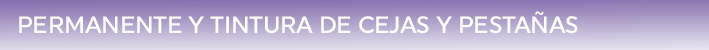
<style>
.page{position:relative;width:709px;height:50px}
.page>*{position:absolute;margin:0}
.t1{font:23.7px "Uniform-Medium";letter-spacing:-0.01em;color:#ffffff;text-transform:uppercase}
</style>
<div class="page">
<p class="t1" style="left:19px;top:11px;width:559px;height:23px">Permanente y tintura de Cejas y Pestañas</p>
</div>
